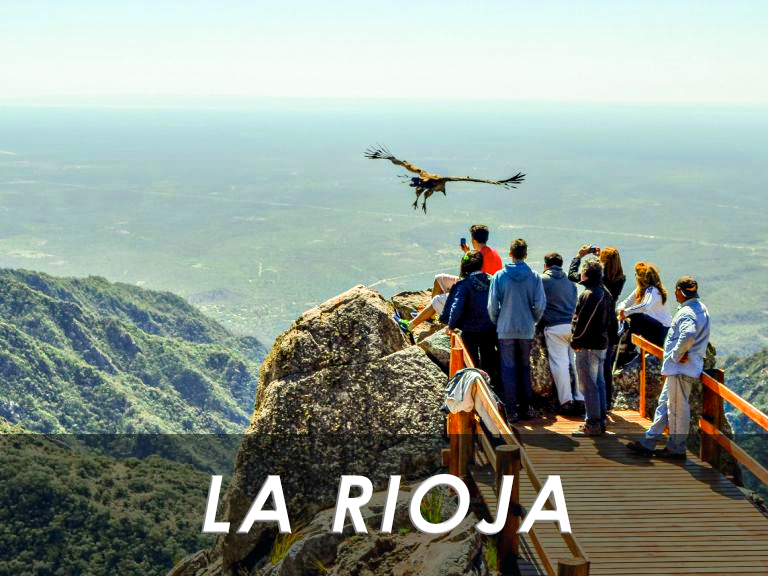
<style>
.page{position:relative;width:768px;height:576px}
.page>*{position:absolute;margin:0}
.t1{font:80.1px "CenturyGothic-Bold";letter-spacing:0.05em;color:#ffffff;font-style:italic}
</style>
<div class="page">
<p class="t1" style="left:201px;top:474px;width:371px;height:61px">LA RIOJA</p>
</div>
